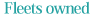
<style>
.page{position:relative;width:90px;height:18px;background:#ffffff}
.page>*{position:absolute;margin:0}
.t1{font:16px "HeiseiMinStd-W7";letter-spacing:-0.04em;color:#25a2a2}
</style>
<div class="page">
<p class="t1" style="left:4px;top:1px;width:86px;height:13px">Fleets owned</p>
</div>
